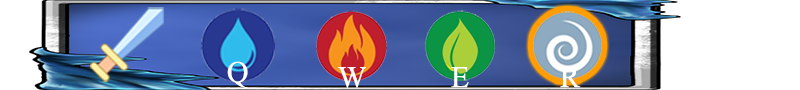
<style>
.page{position:relative;width:800px;height:90px;background:#ffffff}
.page>*{position:absolute;margin:0}
.t1{font:30px "TimesNewRomanPSMT";color:#ffffff}
</style>
<div class="page">
<p class="t1" style="left:227px;top:61px;width:21px;height:27px">Q</p>
<p class="t1" style="left:338px;top:67px;width:28px;height:21px">W</p>
<p class="t1" style="left:451px;top:67px;width:18px;height:21px">E</p>
<p class="t1" style="left:560px;top:67px;width:21px;height:21px">R</p>
</div>
